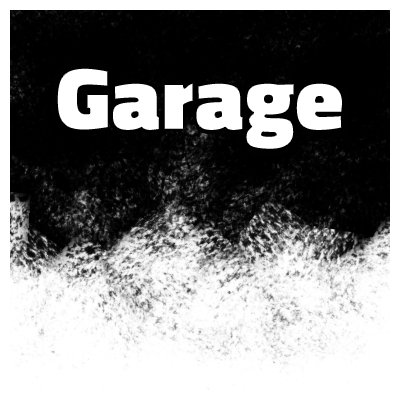
<style>
.page{position:relative;width:400px;height:400px;background:#ffffff}
.page>*{position:absolute;margin:0}
.t1{font:98.8px "TitilliumWeb-Black";scale:0.96 1}
.t2{font:90.8px "TitilliumWeb-Black";color:#ffffff}
</style>
<div class="page">
<p class="t1" style="left:51px;top:60px;width:300px;height:98px;rotate:2deg">Garage</p>
<p class="t2" style="left:56px;top:67px;width:287px;height:83px">Garage</p>
</div>
